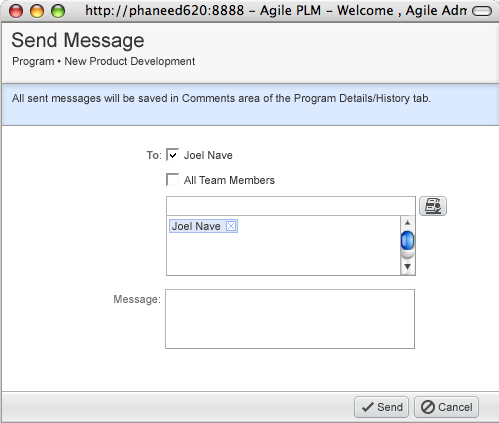
<style>
.page{position:relative;width:499px;height:423px;background:#ffffff}
.page>*{position:absolute;margin:0}
.t1{font:20px "ArialMT";color:#333333}
.t2{font:11px "ArialMT";color:#333333}
.t3{font:11px "Arial-BoldMT";color:#666666}
.t4{font:11px "Arial-BoldMT";color:#333333}
.t5{font:11px "ArialMT";color:#666666}
</style>
<div class="page">
<p class="t1" style="left:12px;top:32px;width:132px;height:20px">Send Message</p>
<p class="t2" style="left:13px;top:57px;width:182px;height:11px">Program • New Product Development</p>
<p class="t2" style="left:12px;top:94px;width:419px;height:11px">All sent messages will be saved in Comments area of the Program Details/History tab.</p>
<p class="t3" style="left:146px;top:151px;width:15px;height:8px"><span class="t4"> </span>To<span class="t5">:</span></p>
<p class="t2" style="left:184px;top:151px;width:49px;height:8px">Joel Nave</p>
<p class="t2" style="left:184px;top:176px;width:91px;height:8px">All Team Members</p>
<p class="t5" style="left:114px;top:295px;width:46px;height:11px">Message:</p>
<p class="t2" style="left:377px;top:403px;width:26px;height:8px">Send</p>
<p class="t2" style="left:438px;top:403px;width:34px;height:8px">Cancel</p>
</div>
